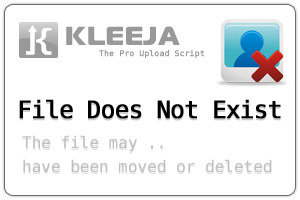
<style>
.page{position:relative;width:300px;height:200px;background:#ffffff}
.page>*{position:absolute;margin:0}
.t1{font:24px "DejaVuSansMono";letter-spacing:-0.05em;color:#010101;font-weight:bold}
.t2{font:16px/24px "DejaVuSansMono";color:#bfbfbf}
</style>
<div class="page">
<p class="t1" style="left:19px;top:99px;width:262px;height:20px">File Does Not Exist</p>
<p class="t2" style="left:22px;top:135px;width:250px;height:38px">The file may ..<br>have been moved or deleted</p>
</div>
